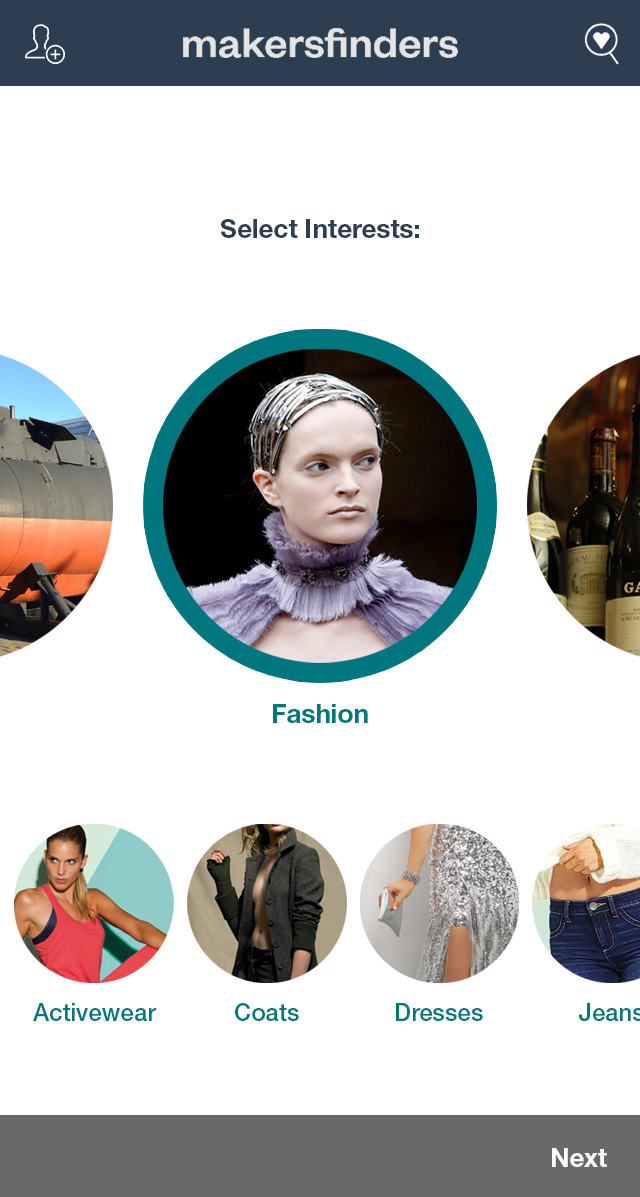
<style>
.page{position:relative;width:640px;height:1197px;background:#ffffff}
.page>*{position:absolute;margin:0}
.t1{font:26px "HelveticaNeueLTStd-Bd";color:#2d3e51}
.t2{font:26px "HelveticaNeueLTStd-Bd";color:#00777e}
.t3{font:24px "HelveticaNeueLTStd-Md";color:#00777e}
.t4{font:26px "HelveticaNeueLTStd-Bd";color:#ffffff}
</style>
<div class="page">
<p class="t1" style="left:221px;top:219px;width:198px;height:19px">Select Interests:</p>
<p class="t2" style="left:273px;top:704px;width:95px;height:19px">Fashion</p>
<p class="t3" style="left:33px;top:1003px;width:124px;height:18px">Activewear</p>
<p class="t3" style="left:235px;top:1003px;width:64px;height:18px">Coats</p>
<p class="t3" style="left:396px;top:1003px;width:87px;height:18px">Dresses</p>
<p class="t4" style="left:552px;top:1148px;width:55px;height:19px">Next</p>
</div>
